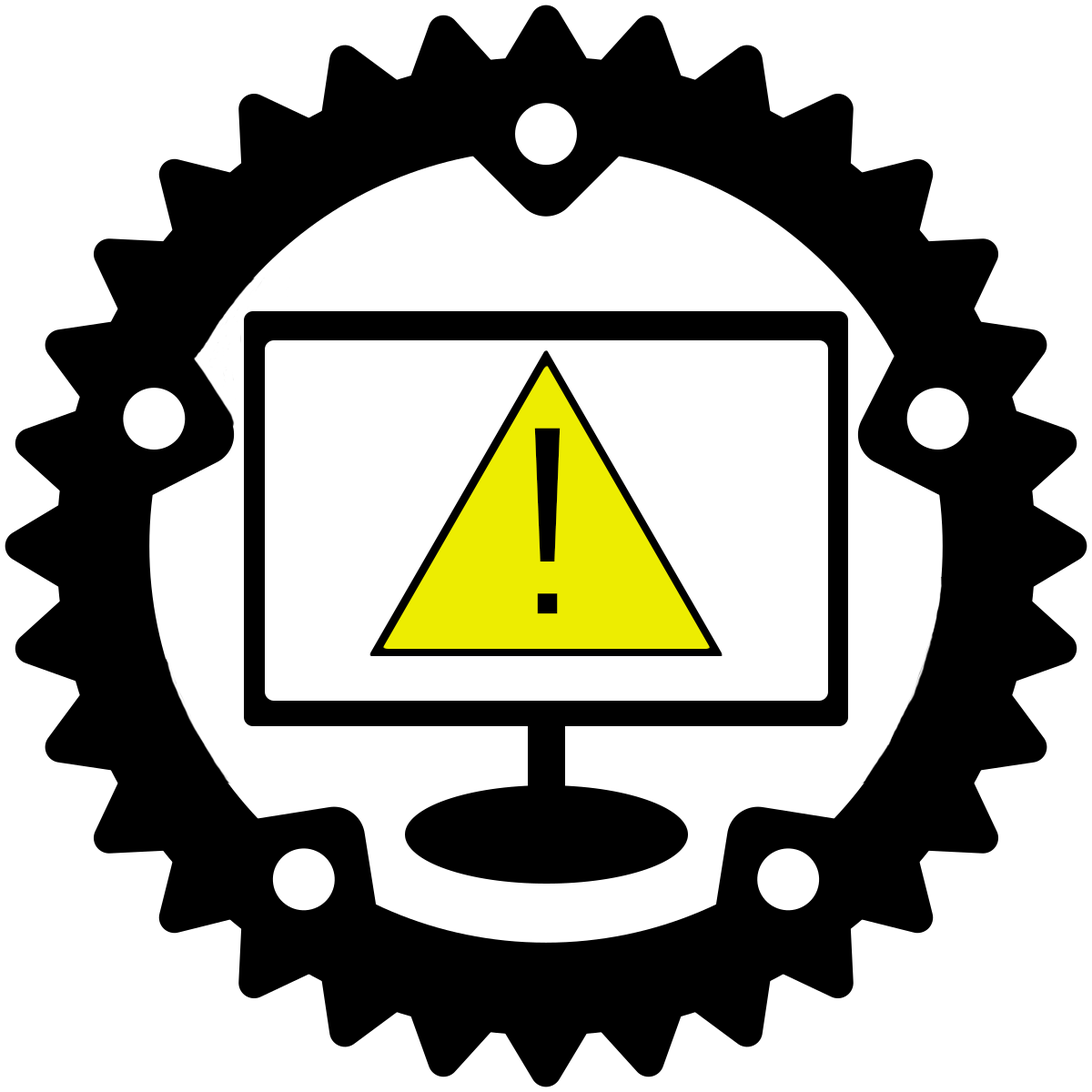
<style>
.page{position:relative;width:1092px;height:1092px;background:#ffffff}
.page>*{position:absolute;margin:0}
.t1{font:227.5px "MS-Gothic";color:#000000}
</style>
<div class="page">
<p class="t1" style="left:534px;top:428px;width:27px;height:186px">!</p>
</div>
